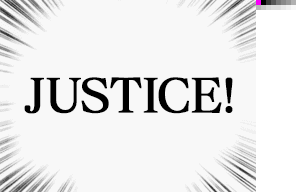
<style>
.page{position:relative;width:296px;height:192px;background:#f8f8f8}
.page>*{position:absolute;margin:0}
.t1{font:46px "MatisseVPro-DB";letter-spacing:-0.025em;color:#000000;font-weight:bold}
</style>
<div class="page">
<p class="t1" style="left:24px;top:77px;width:209px;height:37px">JUSTICE!</p>
</div>
